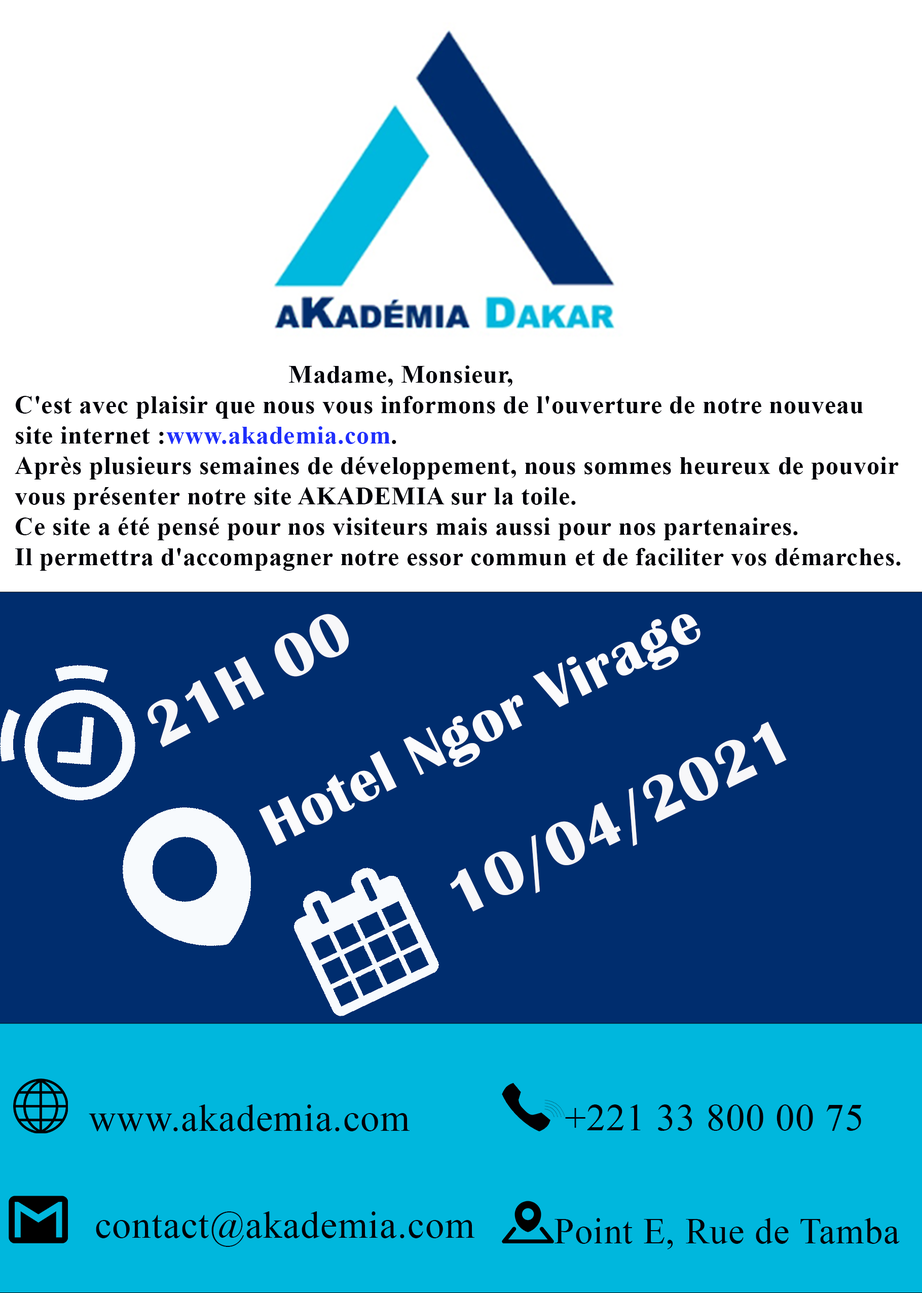
<style>
.page{position:relative;width:922px;height:1293px;background:#ffffff}
.page>*{position:absolute;margin:0}
.t1{font:25.3px "TimesNewRomanPS-BoldMT";letter-spacing:0.02em;color:#000108}
.t2{font:25.3px "TimesNewRomanPS-BoldMT";letter-spacing:0.02em;color:#1f2ffc}
.t3{font:63.4px "BritannicBold";letter-spacing:0.02em;color:#f7f7f9}
.t4{font:59.1px "BritannicBold";letter-spacing:0.02em;color:#fbfbfc}
.t5{font:38px "TimesNewRomanPSMT";letter-spacing:0.02em;color:#000108}
.t6{font:35.9px "TimesNewRomanPSMT";letter-spacing:0.02em;color:#000108}
</style>
<div class="page">
<p class="t1" style="left:15px;top:365px;width:886px;height:206px">Madame, Monsieur, <br>C'est avec plaisir que nous vous informons de l'ouverture de notre nouveau<br>site internet :<span class="t2">www.akademia.com</span>.<br>Après plusieurs semaines de développement, nous sommes heureux de pouvoir<br>vous présenter notre site AKADEMIA sur la toile. <br>Ce site a été pensé pour nos visiteurs mais aussi pour nos partenaires. <br>Il permettra d'accompagner notre essor commun et de faciliter vos démarches.</p>
<p class="t3" style="left:148px;top:614px;width:201px;height:134px;rotate:-28deg">21H 00</p>
<p class="t4" style="left:259px;top:614px;width:442px;height:232px;rotate:-26deg">Hotel Ngor Virage</p>
<p class="t3" style="left:450px;top:722px;width:337px;height:190px;rotate:-26deg">10/04/2021</p>
<p class="t5" style="left:89px;top:1105px;width:321px;height:26px">www.akademia.com</p>
<p class="t5" style="left:565px;top:1105px;width:297px;height:26px">+221 33 800 00 75</p>
<p class="t5" style="left:96px;top:1212px;width:378px;height:35px">contact@akademia.com</p>
<p class="t6" style="left:555px;top:1218px;width:345px;height:32px">Point E, Rue de Tamba</p>
</div>
